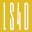
<style>
.page{position:relative;width:32px;height:32px;background:#dfbb24}
.page>*{position:absolute;margin:0}
.t1{font:32px "SixCaps";letter-spacing:0.14em;color:#ffffff;scale:0.62 1}
</style>
<div class="page">
<p class="t1" style="left:3px;top:2px;width:26px;height:29px">LS4D</p>
</div>
